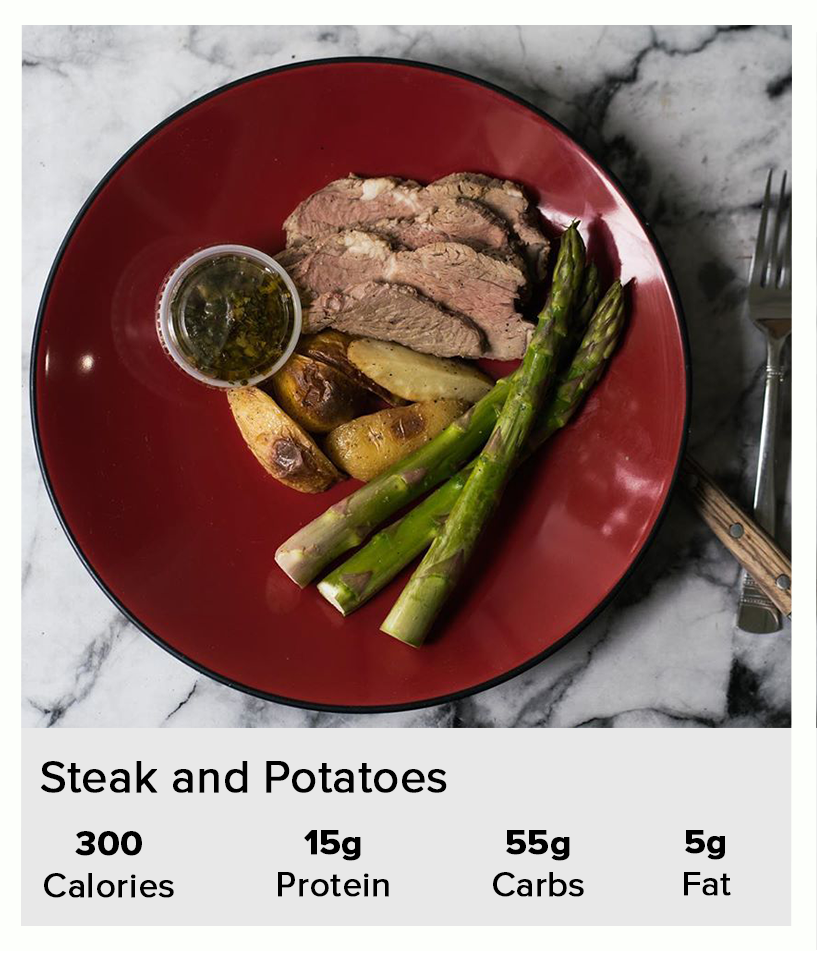
<style>
.page{position:relative;width:817px;height:953px}
.page>*{position:absolute;margin:0}
.t1{font:45.6px "ProximaNova-Regular";color:#000000;font-weight:bold}
.t2{font:34.9px "ProximaNova-Regular";color:#000000;font-weight:bold}
.t3{font:34.9px "ProximaNova-Bold";color:#c63f55;font-weight:bold}
.t4{font:34.9px "ProximaNova-Bold";color:#000000;font-weight:bold}
.t5{font:34.4px "ProximaNova-Regular";color:#000000;font-weight:bold}
.t6{font:34.4px "ProximaNova-Bold";color:#000000;font-weight:bold}
</style>
<div class="page">
<p class="t1" style="left:41px;top:761px;width:406px;height:32px">Steak and Potatoes</p>
<p class="t2" style="left:44px;top:831px;width:130px;height:67px;text-align:center"><span class="t3"><br><br></span><span class="t4">300<br></span>Calories</p>
<p class="t2" style="left:278px;top:830px;width:111px;height:67px;text-align:center"><span class="t3"><br><br></span><span class="t4">15g<br></span>Protein</p>
<p class="t2" style="left:493px;top:830px;width:91px;height:67px;text-align:center"><span class="t3"><br><br></span><span class="t4">55g<br></span>Carbs</p>
<p class="t5" style="left:684px;top:830px;width:47px;height:66px;text-align:center"><span class="t6"><br><br>5g<br></span>Fat</p>
</div>
